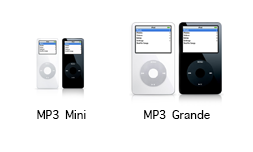
<style>
.page{position:relative;width:253px;height:152px;background:#ffffff}
.page>*{position:absolute;margin:0}
.t1{font:16px "AppleSymbols";color:#000000}
</style>
<div class="page">
<p class="t1" style="left:37px;top:110px;width:49px;height:9px">MP3 Mini</p>
<p class="t1" style="left:144px;top:110px;width:66px;height:9px">MP3 Grande</p>
</div>
